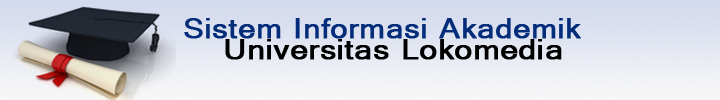
<style>
.page{position:relative;width:720px;height:100px}
.page>*{position:absolute;margin:0}
.t1{font:30px "Gautami";color:#032d7b;font-weight:bold;scale:1.11 1}
.t2{font:30px "Gautami";color:#000000;font-weight:bold;scale:1.13 1}
</style>
<div class="page">
<p class="t1" style="left:184px;top:18px;width:397px;height:21px">Sistem Informasi Akademik</p>
<p class="t2" style="left:225px;top:39px;width:337px;height:21px">Universitas Lokomedia</p>
</div>
